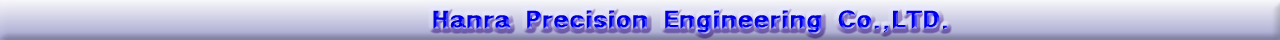
<style>
.page{position:relative;width:1280px;height:40px}
.page>*{position:absolute;margin:0}
.t1{font:24px "GothicXB-HM";scale:1.25 1}
</style>
<div class="page">
<p class="t1" style="left:433px;top:10px;width:514px;height:24px">Hanra Precision Engineering Co.,LTD.</p>
</div>
